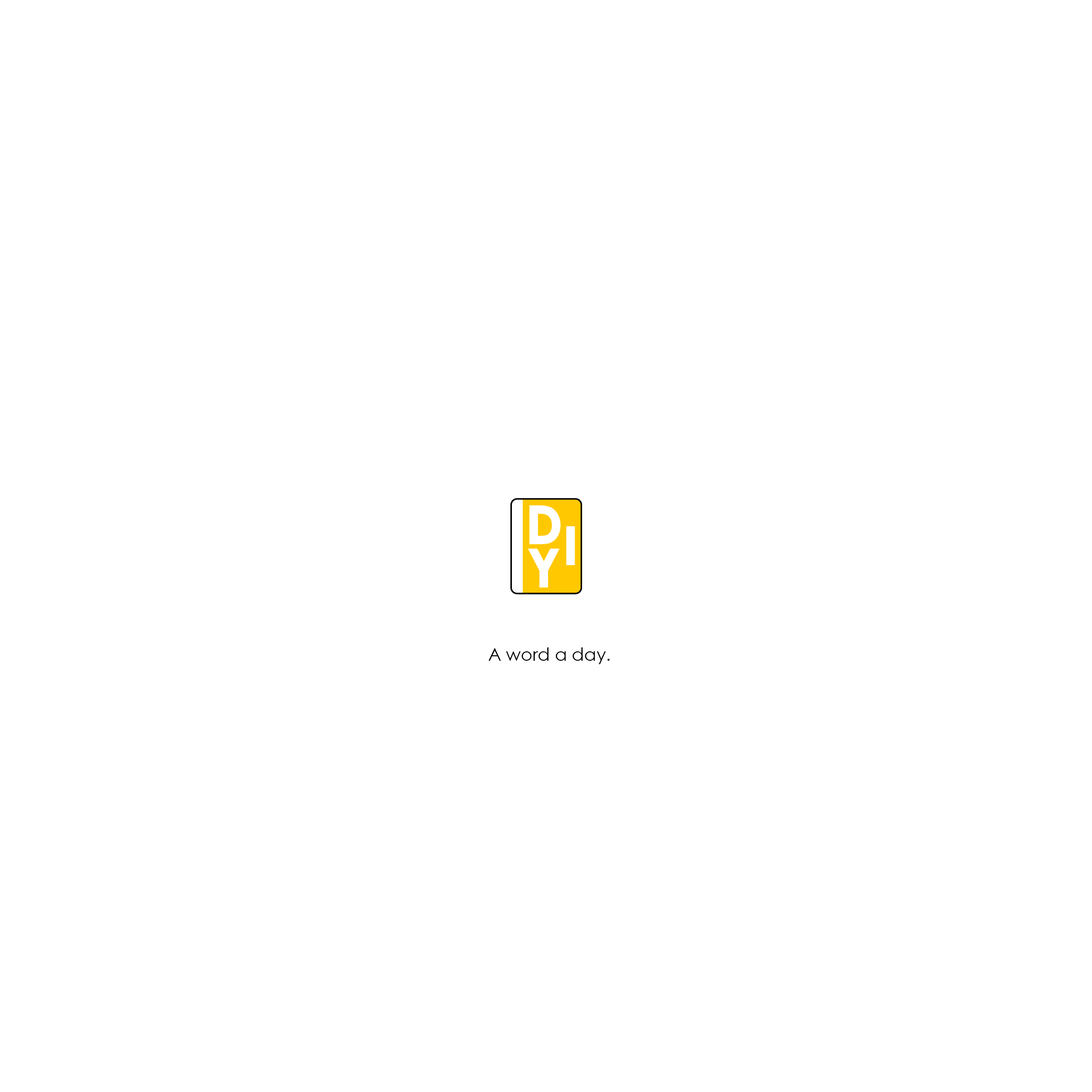
<style>
.page{position:relative;width:1092px;height:1092px;background:#ffffff}
.page>*{position:absolute;margin:0}
.t1{font:17.8px "CenturyGothic";color:#000000}
</style>
<div class="page">
<p class="t1" style="left:488px;top:647px;width:122px;height:17px">A word a day.</p>
</div>
